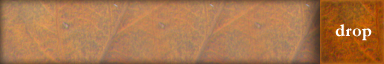
<style>
.page{position:relative;width:384px;height:64px}
.page>*{position:absolute;margin:0}
.t1{font:18.2px "Garamond-Bold";letter-spacing:0.015em;color:#ffffff}
</style>
<div class="page">
<p class="t1" style="left:335px;top:24px;width:37px;height:17px">drop</p>
</div>
